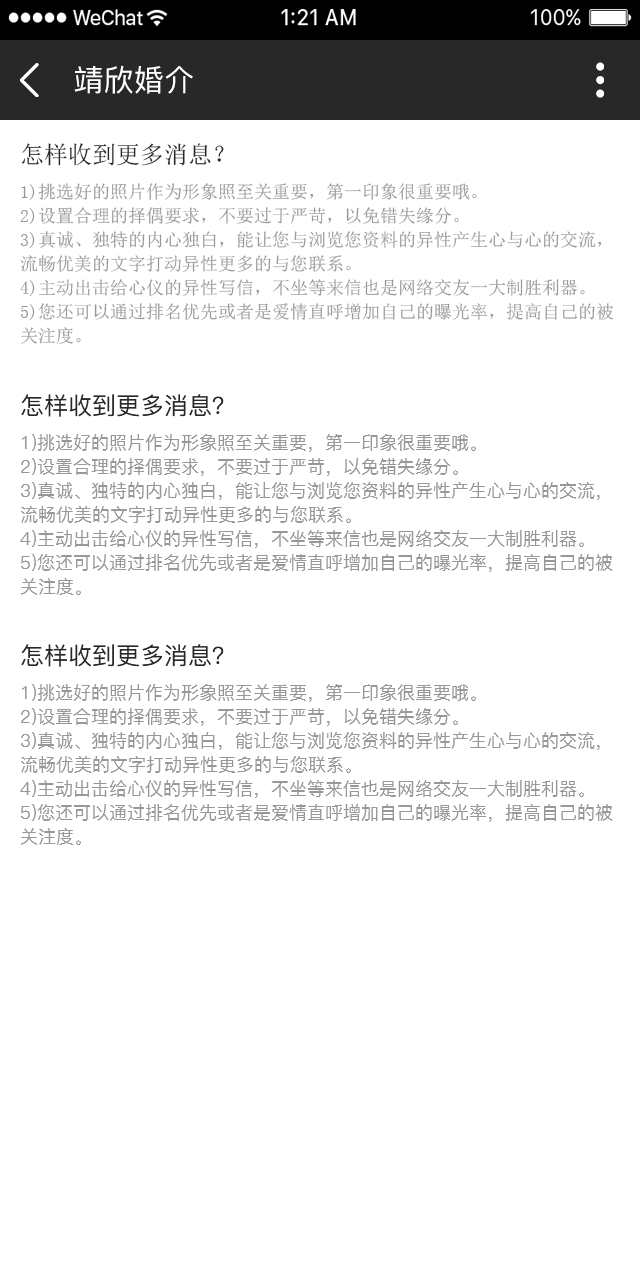
<style>
.page{position:relative;width:640px;height:1280px;background:#ffffff}
.page>*{position:absolute;margin:0}
.t1{font:30px "PingFang-SC-Medium";letter-spacing:0.01em;color:#ffffff;text-transform:uppercase}
.t2{font:18px/24px "SimSun";color:#989898;text-transform:uppercase}
.t3{font:24px/40px "SimSun";color:#282828;text-transform:uppercase}
.t4{font:18px/24px "PingFang-SC-Medium";color:#989898;text-transform:uppercase}
.t5{font:24px/40px "PingFang-SC-Medium";color:#282828;text-transform:uppercase}
</style>
<div class="page">
<p class="t1" style="left:74px;top:65px;width:119px;height:29px">靖欣婚介</p>
<p class="t2" style="left:20px;top:143px;width:594px;height:201px"><span class="t3">怎样收到更多消息？<br></span>1)挑选好的照片作为形象照至关重要，第一印象很重要哦。<br>2)设置合理的择偶要求，不要过于严苛，以免错失缘分。<br>3)真诚、独特的内心独白，能让您与浏览您资料的异性产生心与心的交流，流畅优美的文字打动异性更多的与您联系。<br>4)主动出击给心仪的异性写信，不坐等来信也是网络交友一大制胜利器。<br>5)您还可以通过排名优先或者是爱情直呼增加自己的曝光率，提高自己的被关注度。</p>
<p class="t4" style="left:20px;top:394px;width:593px;height:201px"><span class="t5">怎样收到更多消息？<br></span>1)挑选好的照片作为形象照至关重要，第一印象很重要哦。<br>2)设置合理的择偶要求，不要过于严苛，以免错失缘分。<br>3)真诚、独特的内心独白，能让您与浏览您资料的异性产生心与心的交流，流畅优美的文字打动异性更多的与您联系。<br>4)主动出击给心仪的异性写信，不坐等来信也是网络交友一大制胜利器。<br>5)您还可以通过排名优先或者是爱情直呼增加自己的曝光率，提高自己的被关注度。</p>
<p class="t4" style="left:20px;top:644px;width:593px;height:201px"><span class="t5">怎样收到更多消息？<br></span>1)挑选好的照片作为形象照至关重要，第一印象很重要哦。<br>2)设置合理的择偶要求，不要过于严苛，以免错失缘分。<br>3)真诚、独特的内心独白，能让您与浏览您资料的异性产生心与心的交流，流畅优美的文字打动异性更多的与您联系。<br>4)主动出击给心仪的异性写信，不坐等来信也是网络交友一大制胜利器。<br>5)您还可以通过排名优先或者是爱情直呼增加自己的曝光率，提高自己的被关注度。</p>
</div>
